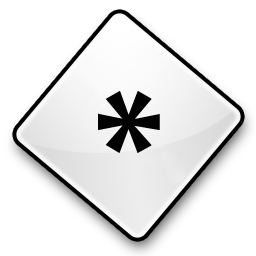
<style>
.page{position:relative;width:256px;height:256px;background:#ffffff}
.page>*{position:absolute;margin:0}
.t1{font:154px "MyriadPro-Bold";letter-spacing:0.005em;color:#020202}
</style>
<div class="page">
<p class="t1" style="left:98px;top:91px;width:62px;height:62px">*</p>
</div>
